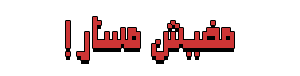
<style>
.page{position:relative;width:300px;height:76px;background:#ffffff}
.page>*{position:absolute;margin:0}
.t1{font:33.1px "Paxalah-8-Bit";color:#cd3535}
.t2{font:33.1px "Paxalah-8-Bit"}
</style>
<div class="page">
<p class="t1" style="left:66px;top:17px;width:168px;height:43px">مفيش مسار !</p>
<p class="t2" style="left:66px;top:21px;width:168px;height:43px">مفيش مسار !</p>
</div>
